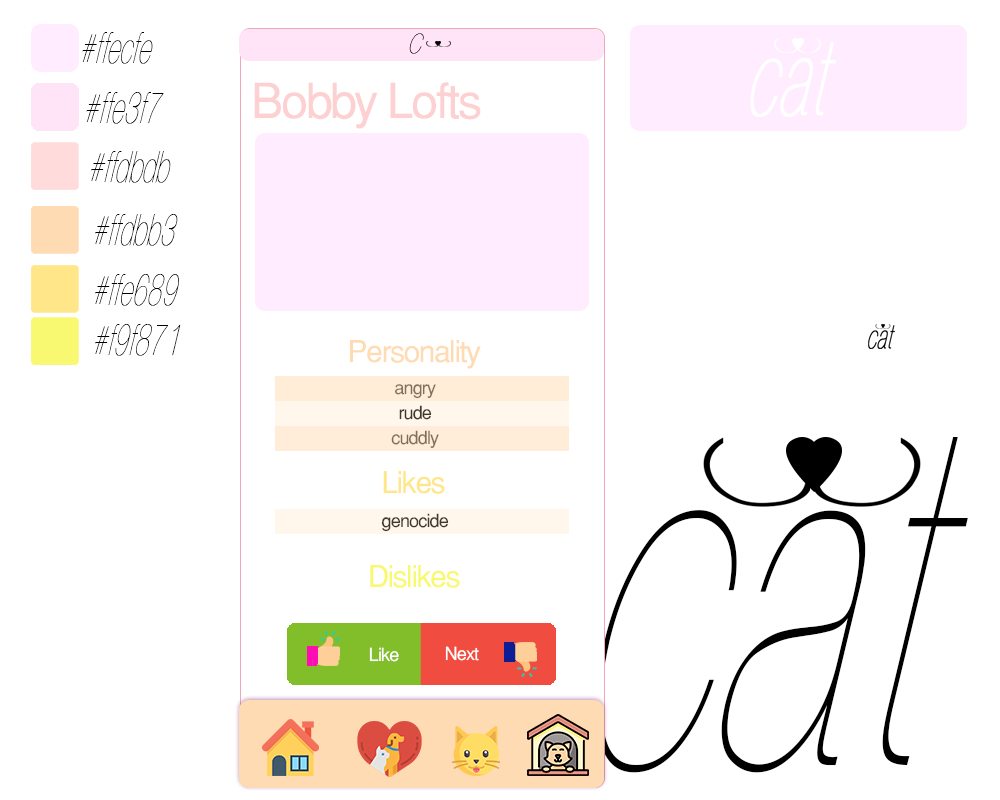
<style>
.page{position:relative;width:1000px;height:800px;background:#ffffff}
.page>*{position:absolute;margin:0}
.t1{font:47.2px "HelveticaObl-Th";color:#000000;font-style:italic;scale:0.55 1}
.t2{font:40.2px "HelveticaObl-Th";font-style:italic;scale:0.71 1}
.t3{font:48px "Helvetica-Normal";letter-spacing:-0.05em;color:#fdd0d0}
.t4{font:30px "Helvetica-Normal";letter-spacing:-0.05em;color:#ffdbb3}
.t5{font:18px "Helvetica-Normal";letter-spacing:-0.05em;color:#82705b}
.t6{font:18px "Helvetica-Normal";letter-spacing:-0.05em;color:#40372d}
.t7{font:18px "Helvetica-Normal";letter-spacing:-0.05em;color:#806e5a}
.t8{font:523.4px "HelveticaObl-Th";color:#000000;font-style:italic;scale:0.55 1}
.t9{font:30px "Helvetica-Normal";letter-spacing:-0.05em;color:#ffe689}
.t10{font:30px "Helvetica-Normal";letter-spacing:-0.05em;color:#f9f871}
.t11{font:18px "Helvetica-Normal";letter-spacing:-0.05em;color:#ffffff}
</style>
<div class="page">
<p class="t1" style="left:82px;top:32px;width:71px;height:32px">#ffecfe</p>
<p class="t2" style="left:409px;top:33px;width:15px;height:21px">c</p>
<p class="t3" style="left:254px;top:82px;width:227px;height:47px">Bobby Lofts</p>
<p class="t1" style="left:86px;top:92px;width:78px;height:32px">#ffe3f7</p>
<p class="t1" style="left:91px;top:151px;width:80px;height:32px">#ffdbdb</p>
<p class="t1" style="left:95px;top:214px;width:83px;height:32px">#ffdbb3</p>
<p class="t1" style="left:95px;top:274px;width:84px;height:32px">#ffe689</p>
<p class="t1" style="left:95px;top:324px;width:86px;height:32px">#f9f871</p>
<p class="t4" style="left:350px;top:340px;width:131px;height:29px">Personality</p>
<p class="t5" style="left:394px;top:384px;width:42px;height:15px">angry</p>
<p class="t6" style="left:399px;top:405px;width:33px;height:15px">rude</p>
<p class="t7" style="left:391px;top:430px;width:48px;height:18px">cuddly</p>
<p class="t8" style="left:595px;top:437px;width:373px;height:336px">cat</p>
<p class="t9" style="left:383px;top:471px;width:62px;height:23px">Likes</p>
<p class="t6" style="left:381px;top:513px;width:68px;height:19px">genocide</p>
<p class="t10" style="left:370px;top:565px;width:90px;height:23px">Dislikes</p>
<p class="t11" style="left:369px;top:647px;width:30px;height:15px">Like</p>
<p class="t11" style="left:445px;top:646px;width:34px;height:15px">Next</p>
</div>
